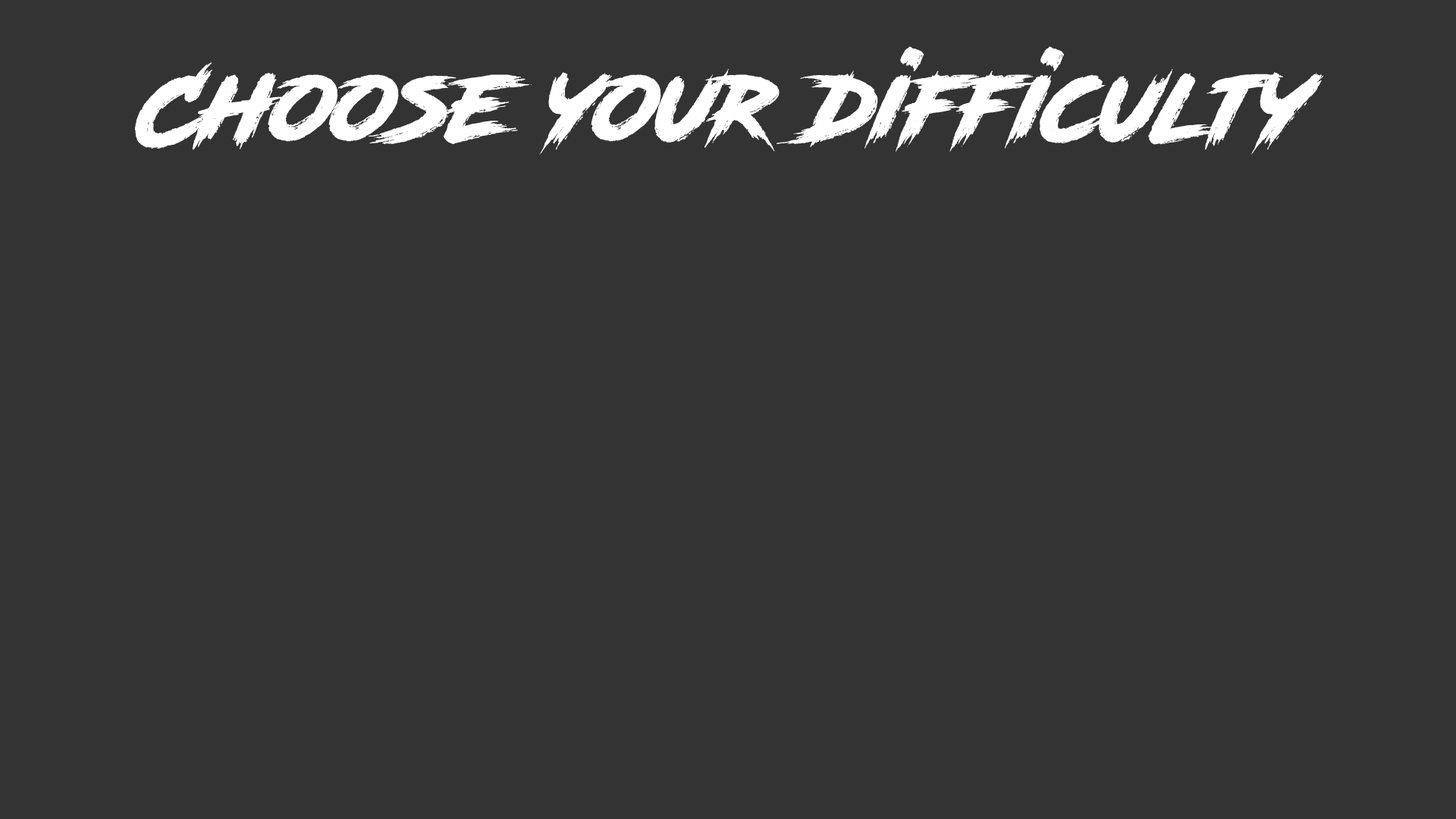
<style>
.page{position:relative;width:1456px;height:819px;background:#333333}
.page>*{position:absolute;margin:0}
.t1{font:94.8px "RoadRage";color:#ffffff}
</style>
<div class="page">
<p class="t1" style="left:135px;top:46px;width:1188px;height:109px">Choose your difficulty</p>
</div>
